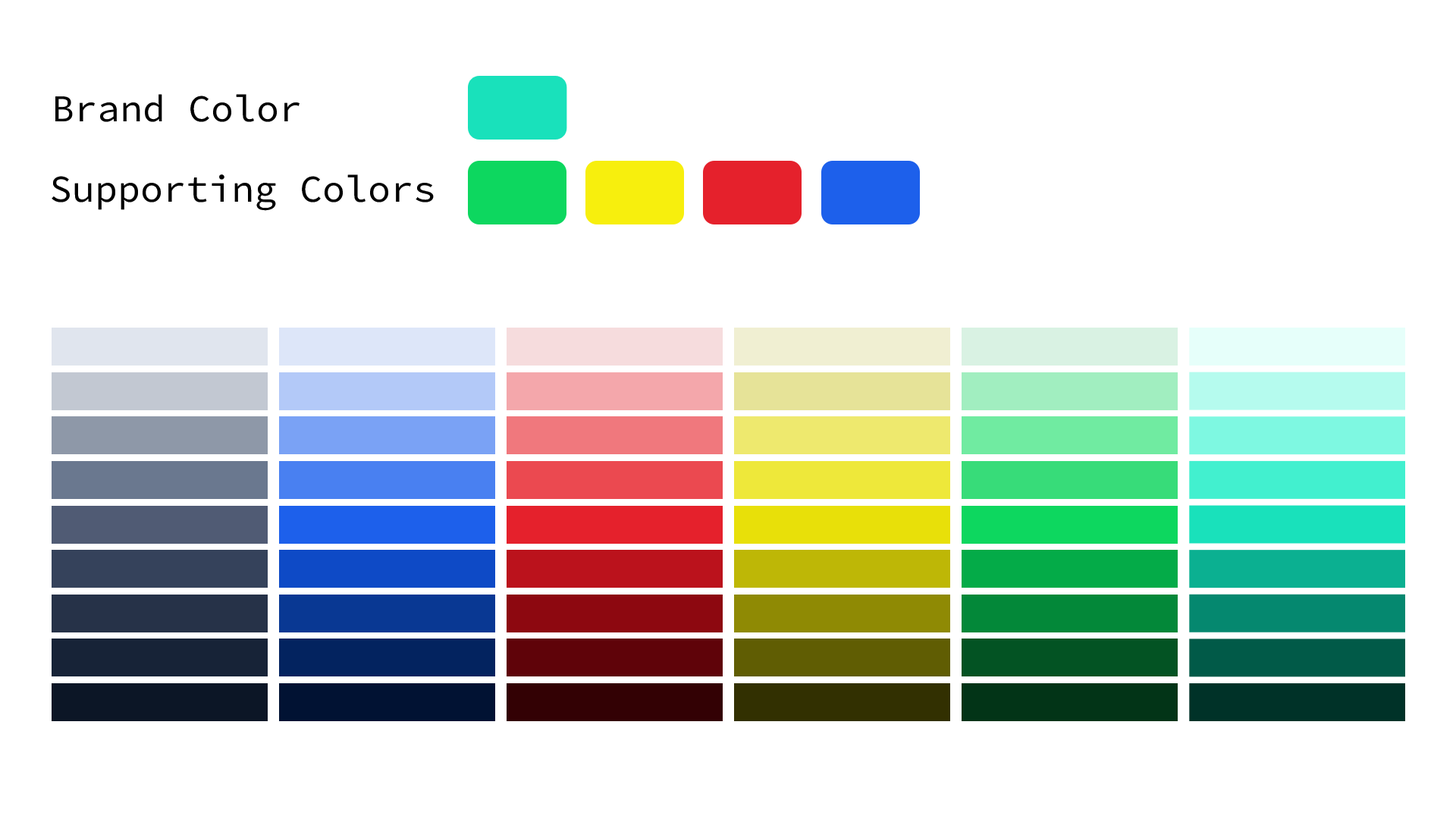
<style>
.page{position:relative;width:1456px;height:819px;background:#ffffff}
.page>*{position:absolute;margin:0}
.t1{font:37.9px "SourceCodePro-Regular";color:#000000}
</style>
<div class="page">
<p class="t1" style="left:55px;top:94px;width:245px;height:28px">Brand Color</p>
<p class="t1" style="left:52px;top:174px;width:382px;height:37px">Supporting Colors</p>
</div>
